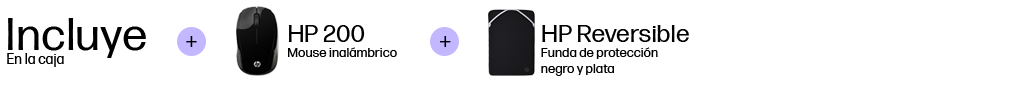
<style>
.page{position:relative;width:1024px;height:86px;background:#ffffff}
.page>*{position:absolute;margin:0}
.t1{font:46px "FormaDJRMicro-Regular";color:#000000}
.t2{font:24.7px "FormaDJRMicro-Regular";color:#000000}
.t3{font:23.2px "FormaDJRMicro-Regular";color:#000000}
.t4{font:14px "FormaDJRMicro-Regular";color:#000000}
.t5{font:13.1px "FormaDJRMicro-Regular";color:#000000}
</style>
<div class="page">
<p class="t1" style="left:8px;top:18px;width:138px;height:40px">Incluye</p>
<p class="t2" style="left:288px;top:25px;width:77px;height:17px">HP 200</p>
<p class="t2" style="left:542px;top:25px;width:147px;height:17px">HP Reversible</p>
<p class="t3" style="left:186px;top:36px;width:11px;height:11px">+</p>
<p class="t3" style="left:439px;top:36px;width:12px;height:11px">+</p>
<p class="t4" style="left:7px;top:53px;width:57px;height:14px">En la caja</p>
<p class="t5" style="left:288px;top:47px;width:109px;height:10px">Mouse inalámbrico</p>
<p class="t5" style="left:541px;top:47px;width:117px;height:29px">Funda de protección<br>negro y plata</p>
</div>
